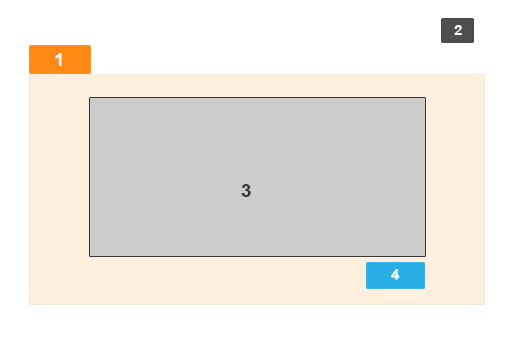
<style>
.page{position:relative;width:511px;height:338px;background:#ffffff}
.page>*{position:absolute;margin:0}
.t1{font:14px "Arial-BoldMT";letter-spacing:-0.025em;color:#fdfafa;scale:1.06 1}
.t2{font:18px "Arial-BoldMT";letter-spacing:-0.025em;color:#fdfdfc;scale:1.06 1}
.t3{font:17.8px "Arial-BoldMT";letter-spacing:-0.025em;color:#373737;scale:1.06 1}
.t4{font:14px "Arial-BoldMT";letter-spacing:-0.025em;color:#ffffff;scale:1.06 1}
</style>
<div class="page">
<p class="t1" style="left:454px;top:25px;width:8px;height:10px">2</p>
<p class="t2" style="left:55px;top:53px;width:7px;height:13px">1</p>
<p class="t3" style="left:241px;top:184px;width:10px;height:13px">3</p>
<p class="t4" style="left:391px;top:269px;width:9px;height:11px">4</p>
</div>
